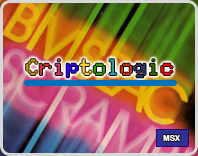
<style>
.page{position:relative;width:198px;height:156px}
.page>*{position:absolute;margin:0}
.t1{font:18px "MSX-Screen0";color:#cc9900}
.t2{font:18px "MSX-Screen0";color:#cc3333}
.t3{font:18px "MSX-Screen0";color:#cc3366}
.t4{font:18px "MSX-Screen0";color:#3300ff}
.t5{font:18px "MSX-Screen0";color:#ffcc33}
.t6{font:18px "MSX-Screen0";color:#339900}
.t7{font:18px "MSX-Screen0";color:#339999}
.t8{font:18px "MSX-Screen0";color:#cc3300}
.t9{font:18px "MSX-Screen0";color:#333366}
.t10{font:18px "MSX-Screen0";color:#336600}
.t11{font:18px "MSX-Screen0";color:#ff0000}
.t12{font:8px "ArialRoundedMTBold";color:#fefcf9}
</style>
<div class="page">
<p class="t1" style="left:26px;top:59px;width:147px;height:19px">C<span class="t2">r</span><span class="t3">i</span><span class="t4">p</span><span class="t5">t</span><span class="t6">o</span><span class="t7">l</span><span class="t8">o</span><span class="t9">g</span><span class="t10">i</span><span class="t11">c</span></p>
<p class="t12" style="left:163px;top:135px;width:17px;height:6px">MSX</p>
</div>
